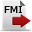
<style>
.page{position:relative;width:32px;height:32px;background:#ffffff}
.page>*{position:absolute;margin:0}
.t1{font:10px "Verdana";color:#070707}
</style>
<div class="page">
<p class="t1" style="left:4px;top:6px;width:18px;height:7px">FMI</p>
</div>
